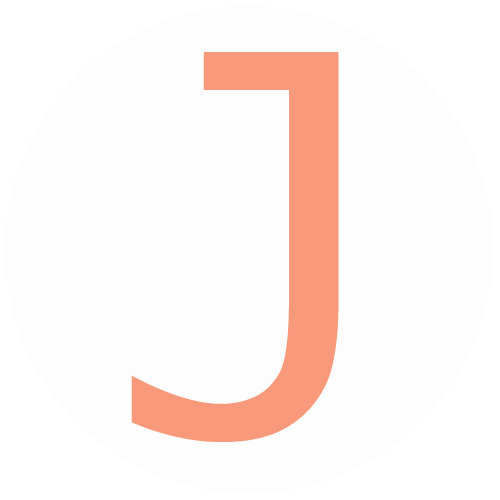
<style>
.page{position:relative;width:500px;height:500px;background:#fdfdfd}
.page>*{position:absolute;margin:0}
.t1{font:500px "Monaco";letter-spacing:-0.1em;color:#f9997b}
</style>
<div class="page">
<p class="t1" style="left:131px;top:52px;width:208px;height:390px">J</p>
</div>
